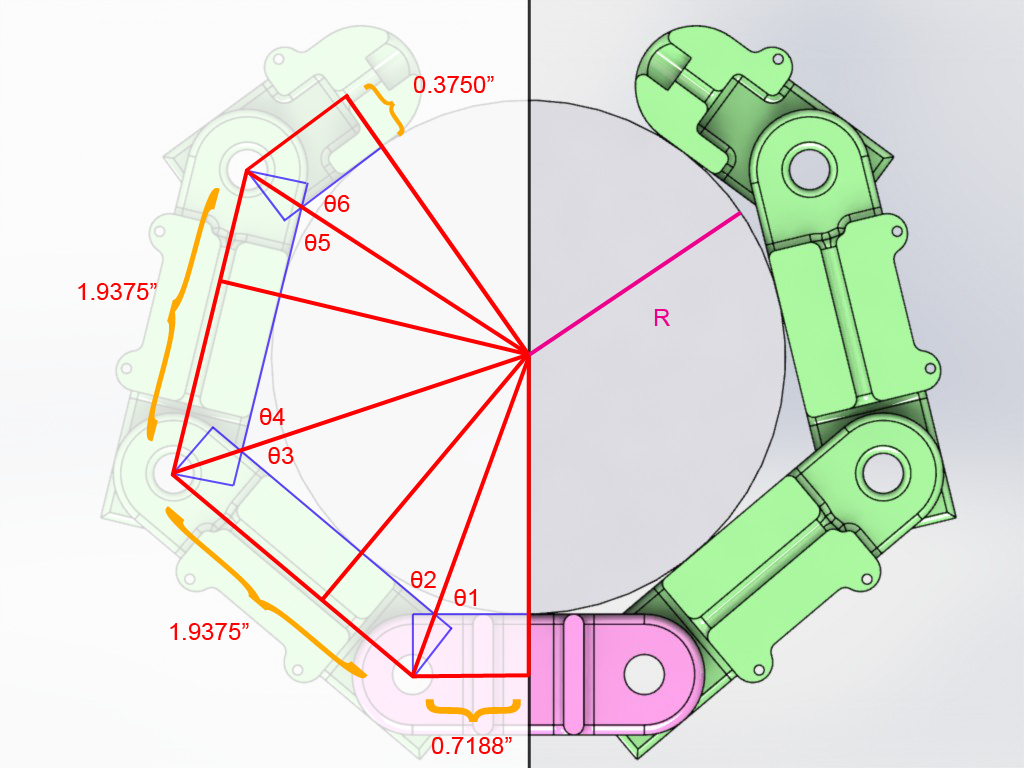
<style>
.page{position:relative;width:1024px;height:768px}
.page>*{position:absolute;margin:0}
.t1{font:24px "ArialMT";color:#ff0000}
.t2{font:66.6px "ArialMT";color:#ffa800;scale:0.79 1}
.t3{font:278.4px "ArialMT";color:#ffa800;scale:0.21 1}
.t4{font:24px "ArialMT";color:#ec008c}
.t5{font:101px "ArialMT";color:#ffa800;scale:0.79 1}
</style>
<div class="page">
<p class="t1" style="left:413px;top:76px;width:81px;height:17px">0.3750”</p>
<p class="t2" style="left:363px;top:83px;width:42px;height:54px;rotate:144deg">{</p>
<p class="t3" style="left:146px;top:188px;width:74px;height:254px;rotate:15deg">{</p>
<p class="t1" style="left:324px;top:195px;width:26px;height:17px">θ6</p>
<p class="t1" style="left:305px;top:234px;width:25px;height:17px">θ5</p>
<p class="t1" style="left:78px;top:283px;width:79px;height:17px">1.9375”</p>
<p class="t4" style="left:654px;top:309px;width:16px;height:17px">R</p>
<p class="t1" style="left:260px;top:408px;width:25px;height:17px">θ4</p>
<p class="t1" style="left:268px;top:447px;width:26px;height:17px">θ3</p>
<p class="t3" style="left:165px;top:506px;width:203px;height:173px;rotate:-50deg">{</p>
<p class="t1" style="left:411px;top:571px;width:25px;height:17px">θ2</p>
<p class="t1" style="left:454px;top:589px;width:23px;height:17px">θ1</p>
<p class="t1" style="left:170px;top:623px;width:79px;height:17px">1.9375”</p>
<p class="t5" style="left:425px;top:699px;width:96px;height:23px;rotate:-90deg">{</p>
<p class="t1" style="left:431px;top:737px;width:81px;height:17px">0.7188”</p>
</div>
